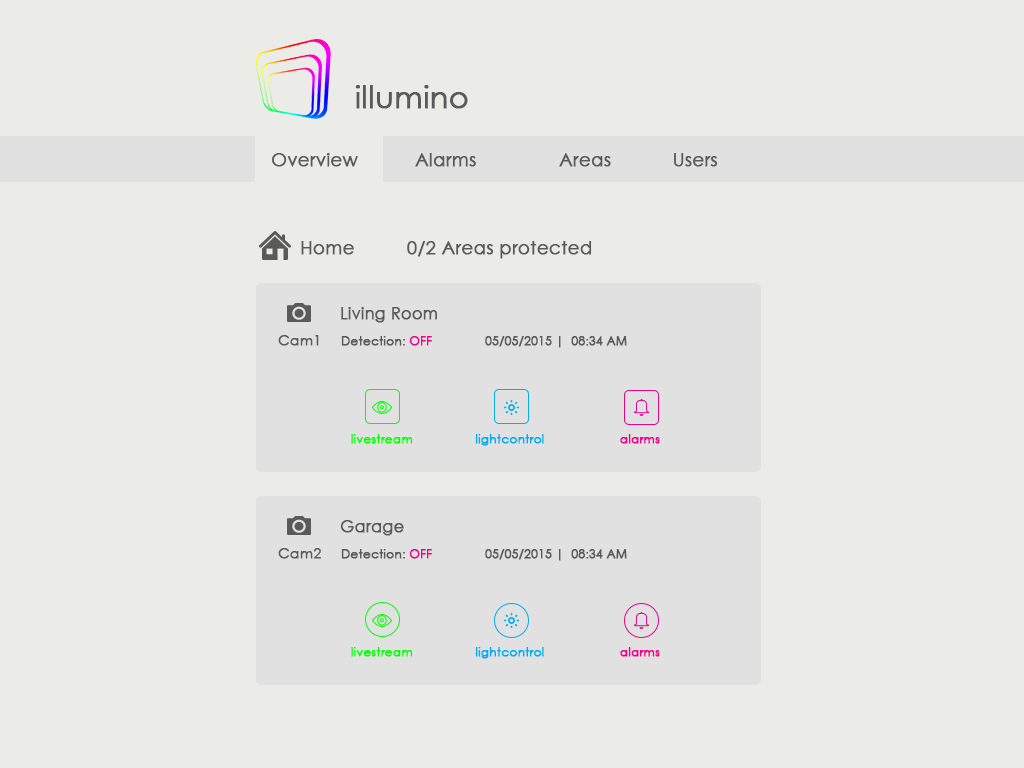
<style>
.page{position:relative;width:1024px;height:768px;background:#ebece7}
.page>*{position:absolute;margin:0}
.t1{font:30px "CenturyGothic";color:#5a5a5b;font-weight:bold}
.t2{font:18px "CenturyGothic";color:#5a5a5b;font-weight:bold}
.t3{font:16px "CenturyGothic";color:#5a5a5b;font-weight:bold}
.t4{font:14px "CenturyGothic";color:#5a5a5b;font-weight:bold}
.t5{font:12px "CenturyGothic";color:#5a5a5b;font-weight:bold}
.t6{font:12px "CenturyGothic";color:#ec008c;font-weight:bold}
.t7{font:12px "CenturyGothic";color:#00ff00;font-weight:bold}
.t8{font:12px "CenturyGothic";color:#00aeef;font-weight:bold}
</style>
<div class="page">
<p class="t1" style="left:355px;top:85px;width:113px;height:24px">illumino</p>
<p class="t2" style="left:271px;top:153px;width:447px;height:14px">Overview  Alarms   Areas   Users</p>
<p class="t2" style="left:301px;top:241px;width:291px;height:18px">Home  0/2 Areas protected</p>
<p class="t3" style="left:341px;top:307px;width:96px;height:16px">Living Room</p>
<p class="t4" style="left:278px;top:335px;width:41px;height:11px">Cam1</p>
<p class="t5" style="left:341px;top:336px;width:286px;height:12px">Detection: <span class="t6">OFF    </span>05/05/2015 |  08:34 AM</p>
<p class="t7" style="left:351px;top:434px;width:62px;height:10px">livestream</p>
<p class="t8" style="left:475px;top:434px;width:69px;height:12px">lightcontrol</p>
<p class="t6" style="left:620px;top:434px;width:40px;height:10px">alarms</p>
<p class="t3" style="left:340px;top:520px;width:64px;height:16px">Garage</p>
<p class="t4" style="left:278px;top:548px;width:43px;height:11px">Cam2</p>
<p class="t5" style="left:341px;top:549px;width:286px;height:12px">Detection: <span class="t6">OFF    </span>05/05/2015 |  08:34 AM</p>
<p class="t7" style="left:351px;top:647px;width:62px;height:10px">livestream</p>
<p class="t8" style="left:475px;top:647px;width:69px;height:12px">lightcontrol</p>
<p class="t6" style="left:620px;top:647px;width:40px;height:10px">alarms</p>
</div>
